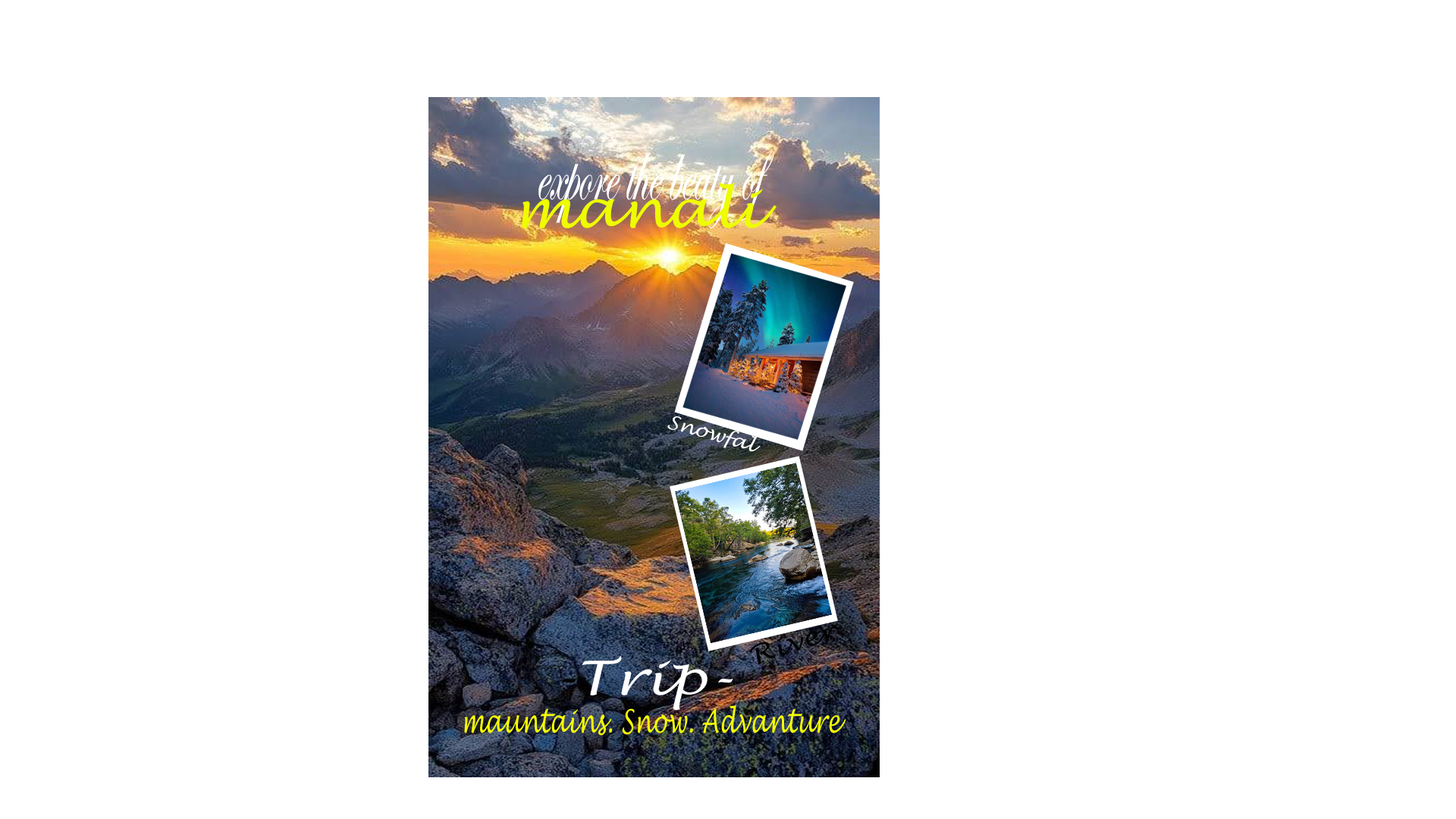
<style>
.page{position:relative;width:1456px;height:819px;background:#ffffff}
.page>*{position:absolute;margin:0}
.t1{font:89.8px "EdwardianScriptITC";color:#ffffff;scale:0.53 1}
.t2{font:52.5px "LucidaHandwriting-Italic";color:#eefd00;scale:1.1 1}
.t3{font:18.6px "LucidaHandwriting-Italic";color:#ffffff;scale:1.1 1}
.t4{font:24.9px "LucidaHandwriting-Italic";color:#030303;scale:1.21 1}
.t5{font:47.1px "LucidaHandwriting-Italic";color:#ffffff;scale:1.22 1}
.t6{font:47.1px "LucidaHandwriting-Italic";color:#030303;scale:1.22 1}
.t7{font:32px "LucidaHandwriting-Italic";color:#f6ff01;scale:0.71 1}
</style>
<div class="page">
<p class="t1" style="left:538px;top:151px;width:236px;height:77px">expore the beaty of</p>
<p class="t2" style="left:522px;top:182px;width:255px;height:46px">manali</p>
<p class="t3" style="left:667px;top:416px;width:94px;height:36px;rotate:16deg">Snowfal</p>
<p class="t4" style="left:750px;top:625px;width:86px;height:40px;rotate:-17deg">River</p>
<p class="t5" style="left:561px;top:656px;width:172px;height:55px"><span class="t6">-</span>Trip-</p>
<p class="t7" style="left:464px;top:704px;width:382px;height:32px">mauntains. Snow. Advanture</p>
</div>
